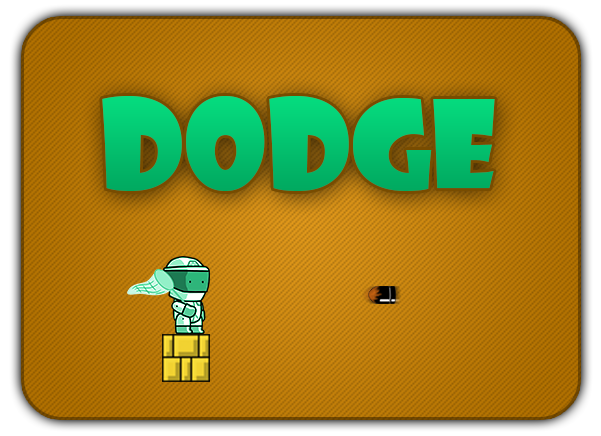
<style>
.page{position:relative;width:601px;height:436px}
.page>*{position:absolute;margin:0}
.t1{font:119.2px "ShowcardGothic-Reg";color:#03c470}
</style>
<div class="page">
<p class="t1" style="left:102px;top:96px;width:393px;height:95px">dodge</p>
</div>
